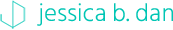
<style>
.page{position:relative;width:173px;height:30px;background:#ffffff}
.page>*{position:absolute;margin:0}
.t1{font:25px "HindSiliguri-Light";color:#00c5b4}
</style>
<div class="page">
<p class="t1" style="left:37px;top:3px;width:136px;height:23px">jessica b. dan</p>
</div>
